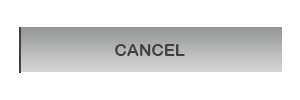
<style>
.page{position:relative;width:300px;height:100px;background:#ffffff}
.page>*{position:absolute;margin:0}
.t1{font:16.7px "ArialRoundedMTBold";color:#424242}
</style>
<div class="page">
<p class="t1" style="left:115px;top:44px;width:70px;height:12px">CANCEL</p>
</div>
